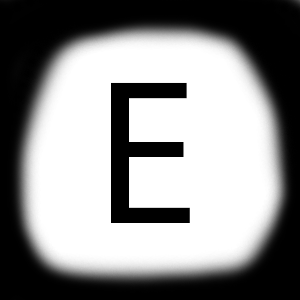
<style>
.page{position:relative;width:300px;height:300px;background:#ffffff}
.page>*{position:absolute;margin:0}
.t1{font:208.3px "MyriadPro-Regular";color:#000000}
</style>
<div class="page">
<p class="t1" style="left:111px;top:82px;width:79px;height:141px">E</p>
</div>
